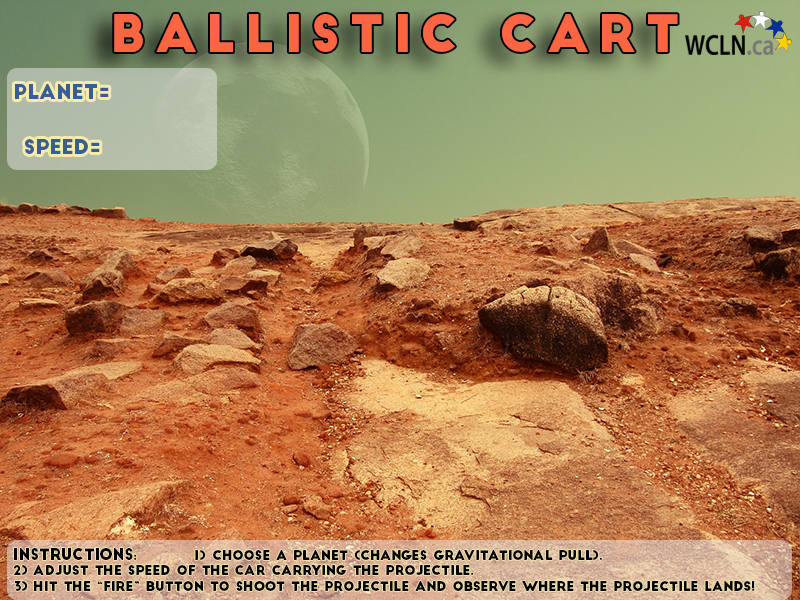
<style>
.page{position:relative;width:800px;height:600px}
.page>*{position:absolute;margin:0}
.t1{font:50px "BigJohn";letter-spacing:0.18em;color:#fb6542}
.t2{font:20px "BigJohn";color:#375e97}
.t3{font:13px "BigJohn";color:#000000}
.t4{font:15px "BigJohn";color:#000000}
</style>
<div class="page">
<p class="t1" style="left:114px;top:14px;width:564px;height:39px">Ballistic cart</p>
<p class="t2" style="left:15px;top:84px;width:94px;height:15px">Planet=</p>
<p class="t2" style="left:25px;top:139px;width:75px;height:15px">Speed=</p>
<p class="t3" style="left:13px;top:548px;width:742px;height:43px"><span class="t4">Instructions</span>:  1) Choose a planet (changes gravitational pull).<br>2) Adjust the speed of the car carrying the projectile. <br>3) Hit the “Fire” button to shoot the projectile and observe where the projectile lands!</p>
</div>
